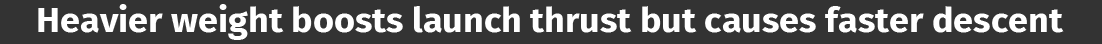
<style>
.page{position:relative;width:1102px;height:44px;background:#333333}
.page>*{position:absolute;margin:0}
.t1{font:34.2px "FiraSans-Bold";color:#ffffff;scale:1.05 1}
</style>
<div class="page">
<p class="t1" style="left:38px;top:4px;width:1026px;height:36px">Heavier weight boosts launch thrust but causes faster descent</p>
</div>
